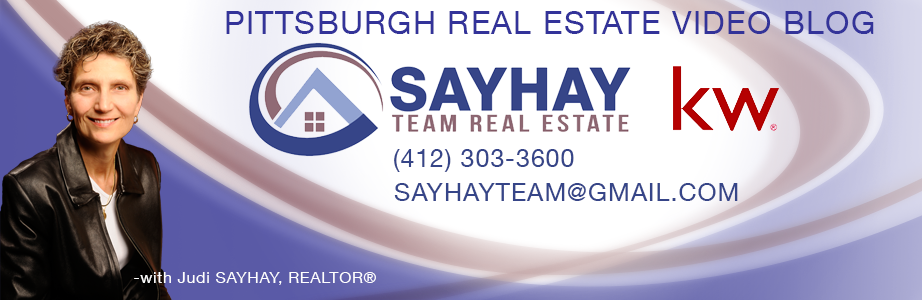
<style>
.page{position:relative;width:922px;height:300px;background:#ffffff}
.page>*{position:absolute;margin:0}
.t1{font:32px "HelveticaNeueLTCom-Roman";letter-spacing:0.04em;color:#333399}
.t2{font:25px "HelveticaNeueLTCom-Roman";letter-spacing:0.04em;color:#364588}
.t3{font:16px "HelveticaNeueLTCom-Roman";letter-spacing:0.04em;color:#ffffff}
</style>
<div class="page">
<p class="t1" style="left:226px;top:11px;width:648px;height:23px">PITTSBURGH REAL ESTATE VIDEO BLOG</p>
<p class="t2" style="left:394px;top:149px;width:180px;height:23px">(412) 303-3600</p>
<p class="t2" style="left:394px;top:183px;width:344px;height:18px">SAYHAYTEAM@GMAIL.COM</p>
<p class="t3" style="left:134px;top:272px;width:242px;height:13px">-with Judi SAYHAY, REALTOR®</p>
</div>
